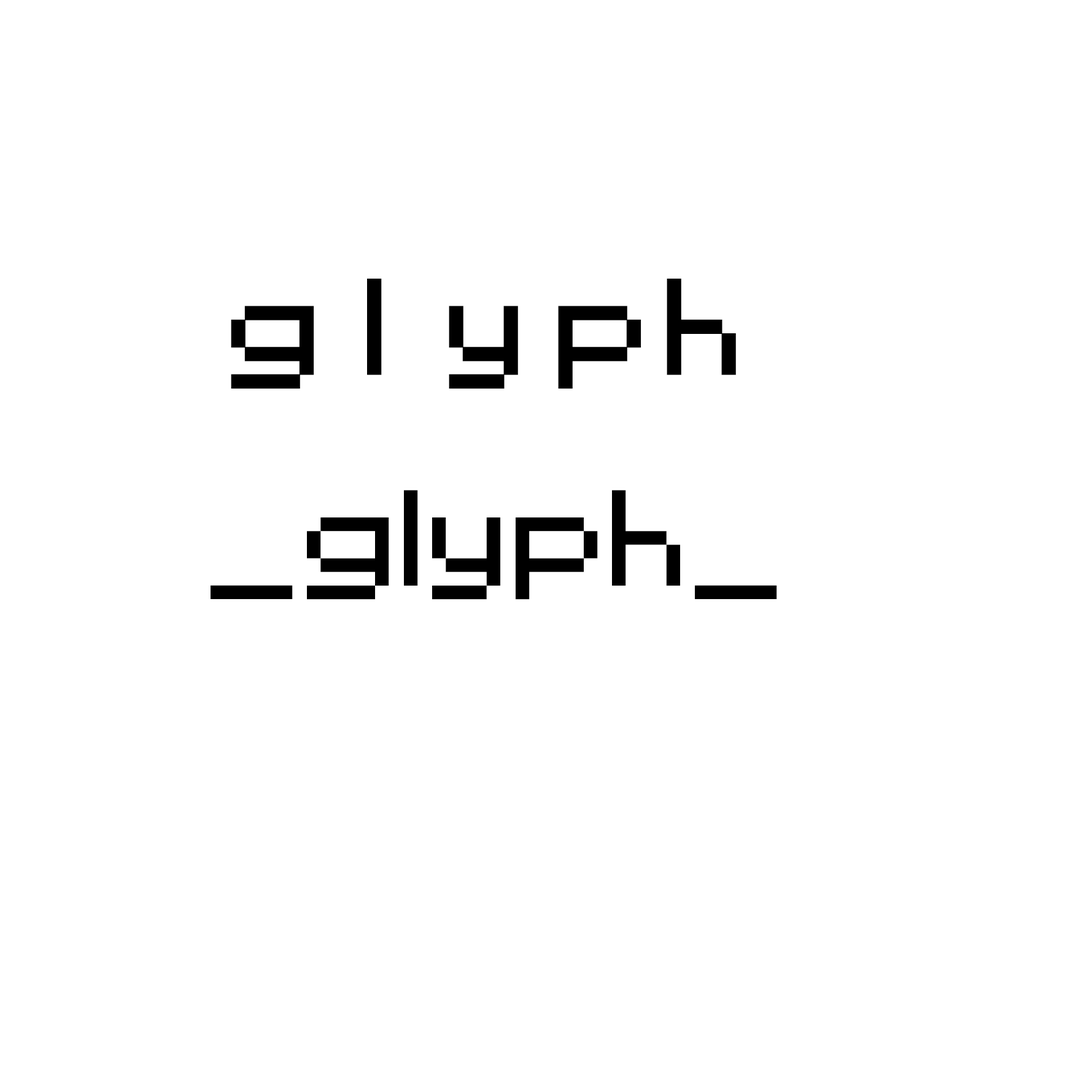
<style>
.page{position:relative;width:1092px;height:1092px;background:#ffffff}
.page>*{position:absolute;margin:0}
.t1{font:109px "PokemonGB";color:#000000}
.t2{font:109px "PKMN-RBYGSC";color:#000000}
</style>
<div class="page">
<p class="t1" style="left:231px;top:278px;width:505px;height:111px">__glyph__</p>
<p class="t2" style="left:211px;top:490px;width:566px;height:110px">_glyph_</p>
</div>
